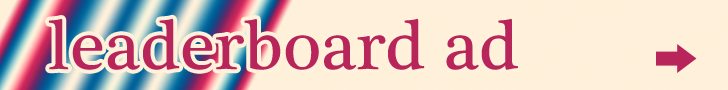
<style>
.page{position:relative;width:728px;height:90px;background:#fff0da}
.page>*{position:absolute;margin:0}
.t1{font:72px "PlantagenetCherokee";color:#b8255b}
</style>
<div class="page">
<p class="t1" style="left:48px;top:18px;width:470px;height:52px">leaderboard ad</p>
</div>
